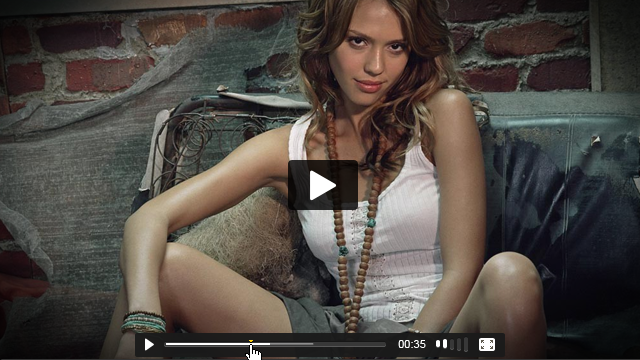
<style>
.page{position:relative;width:640px;height:360px}
.page>*{position:absolute;margin:0}
.t1{font:11px "ArialMT";color:#ffffff}
</style>
<div class="page">
<p class="t1" style="left:398px;top:340px;width:28px;height:8px">00:35</p>
</div>
